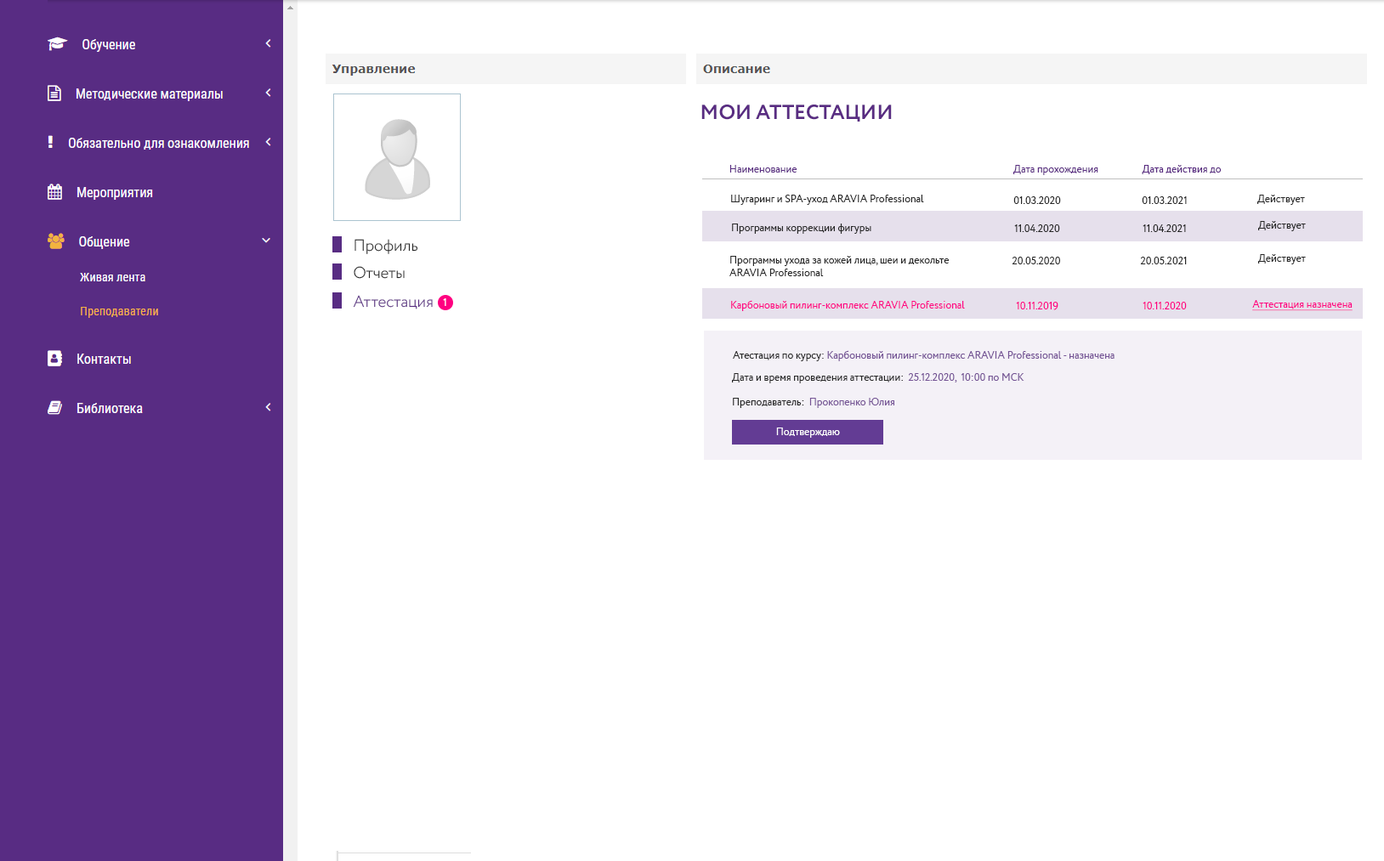
<style>
.page{position:relative;width:1384px;height:861px;background:#ffffff}
.page>*{position:absolute;margin:0}
.t1{font:20.4px "Circe-Bold";color:#592c82;text-transform:uppercase}
.t2{font:10.2px "Circe-Regular";color:#592c81}
.t3{font:10.2px "Circe-Regular";color:#272727}
.t4{font:15.9px "Circe-Light";color:#272727}
.t5{font:15.9px "Circe-Light";color:#592c82}
.t6{font:10.2px "Circe-Regular";color:#ffffff}
.t7{font:10.2px "Circe-Regular";color:#ff0081}
.t8{font:10.2px "Circe-Regular";color:#ff0081;text-decoration:underline}
.t9{font:10.2px "Circe-Regular";color:#745395}
</style>
<div class="page">
<p class="t1" style="left:702px;top:105px;width:190px;height:17px">Мои Аттестации</p>
<p class="t2" style="left:730px;top:165px;width:68px;height:8px">Наименование</p>
<p class="t2" style="left:1014px;top:165px;width:85px;height:10px">Дата прохождения</p>
<p class="t2" style="left:1142px;top:165px;width:80px;height:9px">Дата действия до</p>
<p class="t3" style="left:731px;top:195px;width:193px;height:10px">Шугаринг и SPA-уход ARAVIA Professional</p>
<p class="t3" style="left:1014px;top:196px;width:47px;height:8px">01.03.2020</p>
<p class="t3" style="left:1142px;top:196px;width:45px;height:8px">01.03.2021</p>
<p class="t3" style="left:1258px;top:195px;width:47px;height:10px">Действует</p>
<p class="t3" style="left:1258px;top:221px;width:48px;height:10px">Действует</p>
<p class="t3" style="left:732px;top:224px;width:140px;height:10px">Программы коррекции фигуры</p>
<p class="t3" style="left:1014px;top:224px;width:46px;height:8px">11.04.2020</p>
<p class="t3" style="left:1143px;top:224px;width:43px;height:8px">11.04.2021</p>
<p class="t4" style="left:355px;top:239px;width:63px;height:15px">Профиль</p>
<p class="t3" style="left:730px;top:256px;width:220px;height:20px">Программы ухода за кожей лица, шеи и декольте <br>ARAVIA Professional</p>
<p class="t3" style="left:1012px;top:257px;width:48px;height:7px">20.05.2020</p>
<p class="t3" style="left:1140px;top:257px;width:47px;height:7px">20.05.2021</p>
<p class="t3" style="left:1258px;top:254px;width:48px;height:10px">Действует</p>
<p class="t4" style="left:354px;top:266px;width:51px;height:13px">Отчеты</p>
<p class="t5" style="left:353px;top:295px;width:80px;height:15px">Аттестация</p>
<p class="t6" style="left:443px;top:298px;width:3px;height:8px">1</p>
<p class="t7" style="left:731px;top:300px;width:234px;height:11px">Карбоновый пилинг-комплекс ARAVIA Professional</p>
<p class="t7" style="left:1016px;top:302px;width:43px;height:8px">10.11.2019</p>
<p class="t7" style="left:1143px;top:302px;width:44px;height:8px">10.11.2020</p>
<p class="t8" style="left:1253px;top:300px;width:100px;height:11px">Аттестация назначена</p>
<p class="t9" style="left:733px;top:350px;width:382px;height:11px"><span class="t3">Атестация по курсу: </span>Карбоновый пилинг-комплекс ARAVIA Professional - назначена</p>
<p class="t3" style="left:732px;top:373px;width:293px;height:10px">Дата и время проведения аттестации: <span class="t9"> 25.12.2020,  10:00 по МСК</span></p>
<p class="t9" style="left:733px;top:398px;width:162px;height:10px"><span class="t3">Преподаватель: </span> Прокопенко Юлия</p>
<p class="t6" style="left:776px;top:428px;width:64px;height:10px">Подтверждаю</p>
</div>
